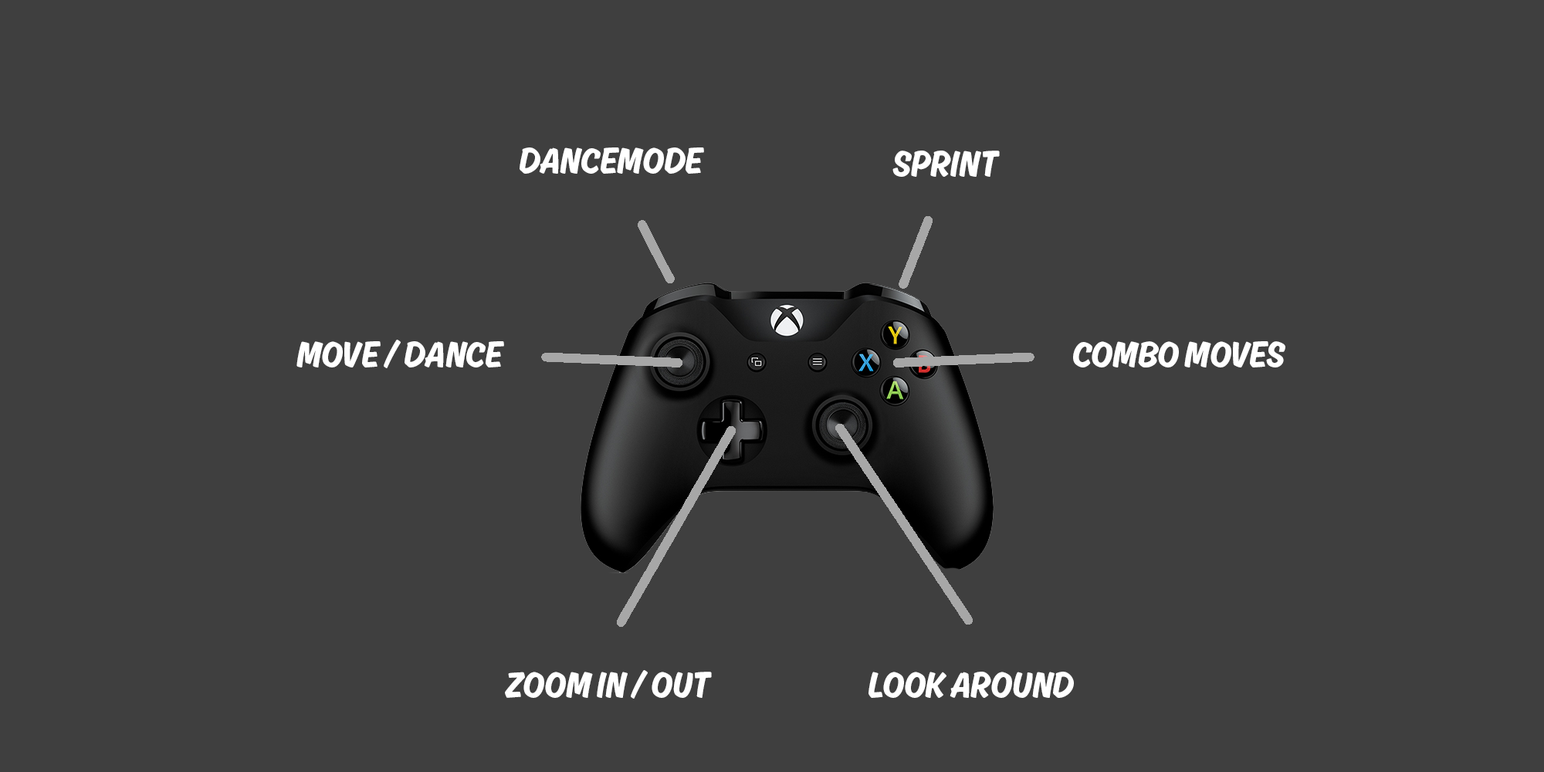
<style>
.page{position:relative;width:1544px;height:772px;background:#3f3f3f}
.page>*{position:absolute;margin:0}
.t1{font:38.6px "Ahkio-Regular";color:#ffffff}
</style>
<div class="page">
<p class="t1" style="left:520px;top:147px;width:184px;height:27px">DANCEMODE</p>
<p class="t1" style="left:893px;top:151px;width:107px;height:26px">SPRINT</p>
<p class="t1" style="left:297px;top:340px;width:207px;height:28px">MOVE / DANCE</p>
<p class="t1" style="left:1073px;top:341px;width:213px;height:27px">COMBO MOVES</p>
<p class="t1" style="left:505px;top:670px;width:207px;height:29px">ZOOM IN / OUT</p>
<p class="t1" style="left:869px;top:672px;width:205px;height:26px">LOOK AROUND</p>
</div>
